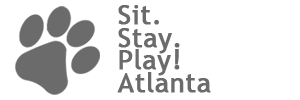
<style>
.page{position:relative;width:300px;height:100px;background:#ffffff}
.page>*{position:absolute;margin:0}
.t1{font:27.3px/22.7px "TrebuchetMS";color:#6b6b6b;font-weight:bold}
</style>
<div class="page">
<p class="t1" style="left:117px;top:5px;width:94px;height:88px">Sit.<br>Stay.<br>Play!<br>Atlanta</p>
</div>
